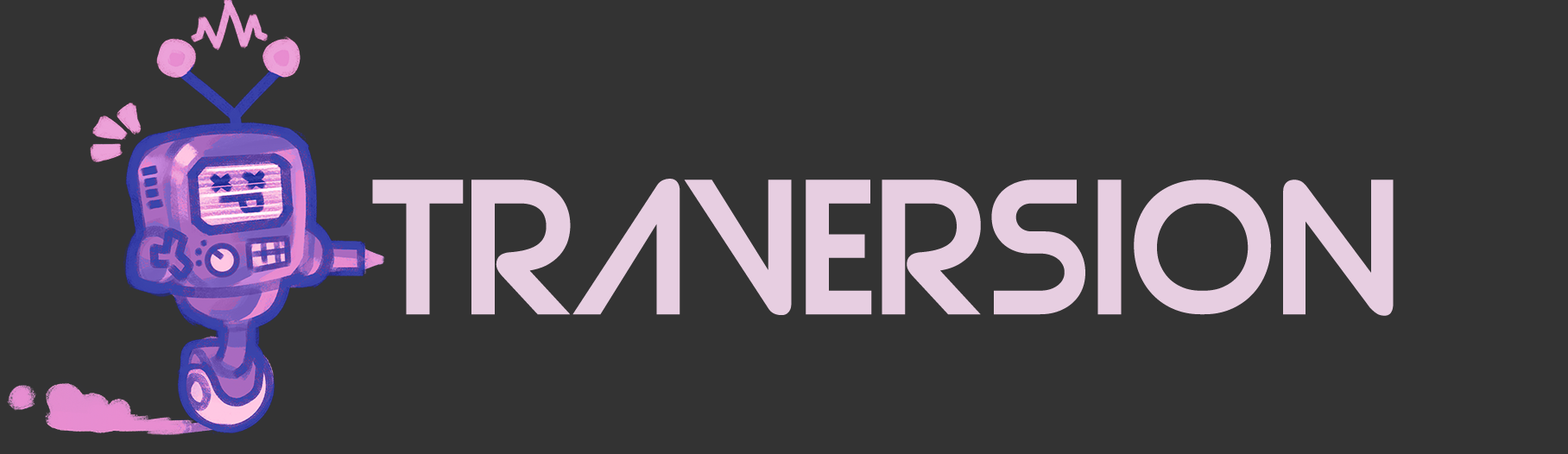
<style>
.page{position:relative;width:1568px;height:454px;background:#333333}
.page>*{position:absolute;margin:0}
.t1{font:172.3px "Strasua-Regular";color:#e7cee1}
</style>
<div class="page">
<p class="t1" style="left:372px;top:179px;width:1022px;height:137px">traversion</p>
</div>
